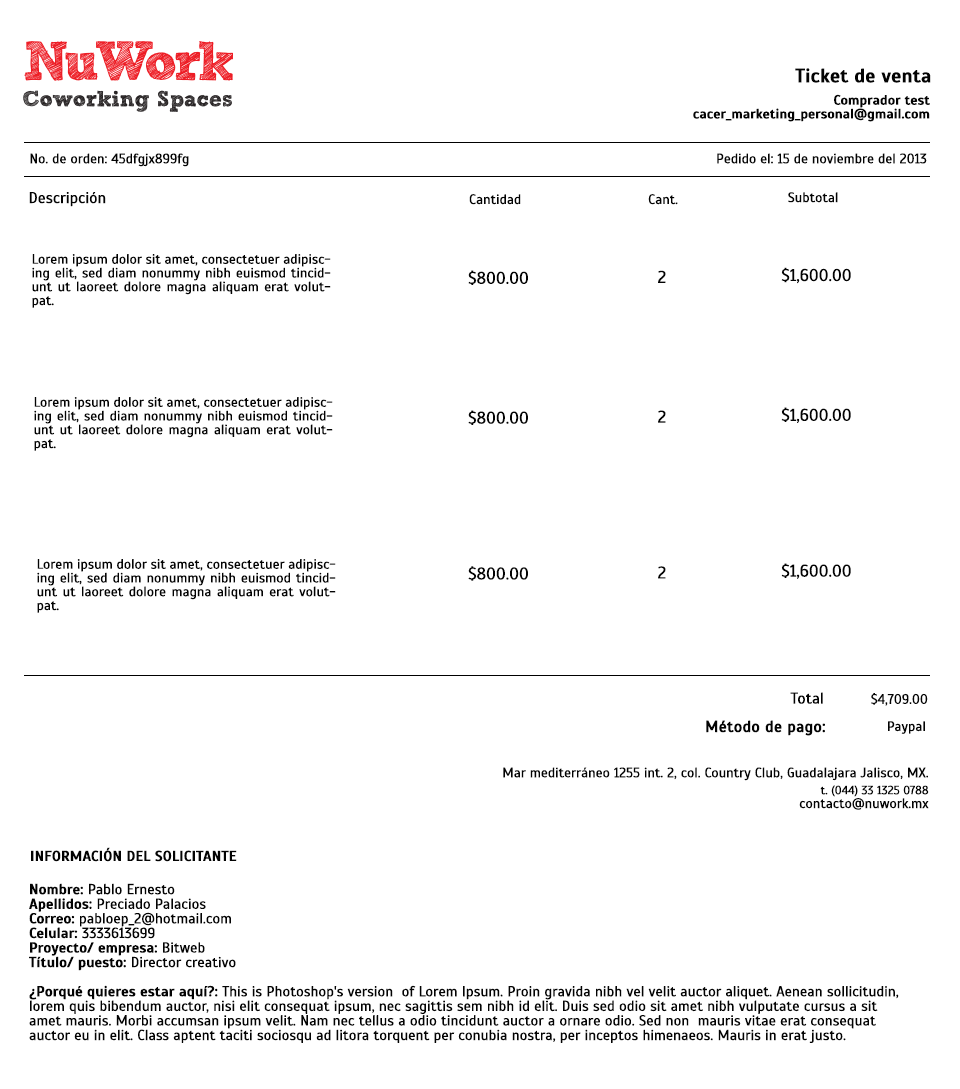
<style>
.page{position:relative;width:960px;height:1089px;background:#ffffff}
.page>*{position:absolute;margin:0}
.t1{font:19.6px "Scada-Bold";color:#030303}
.t2{font:13.8px/13.8px "Scada-Bold";color:#030303}
.t3{font:13.8px "Scada-Regular";color:#030303}
.t4{font:15.7px "Scada-Regular";color:#030303}
.t5{font:13.8px/13.8px "Scada-Regular";color:#030303}
.t6{font:17px "Scada-Regular";color:#030303}
.t7{font:15.7px "Scada-Regular";color:#030303;font-weight:bold}
.t8{font:12px/13.8px "Scada-Regular";color:#030303}
.t9{font:12px/17px "Scada-Regular";color:#030303}
.t10{font:14.6px "Scada-Bold";color:#030303}
.t11{font:14.6px/14.6px "Scada-Regular";color:#030303}
.t12{font:14.6px/14.6px "Scada-Bold";color:#030303}
</style>
<div class="page">
<p class="t1" style="left:795px;top:68px;width:136px;height:15px">Ticket de venta</p>
<p class="t2" style="left:693px;top:94px;width:237px;height:28px;text-align:right">Comprador test<br>cacer_marketing_personal@gmail.com</p>
<p class="t3" style="left:30px;top:153px;width:159px;height:14px">No. de orden: 45dfgjx899fg</p>
<p class="t3" style="left:717px;top:153px;width:210px;height:11px">Pedido el: 15 de noviembre del 2013</p>
<p class="t4" style="left:29px;top:192px;width:77px;height:15px">Descripción</p>
<p class="t3" style="left:469px;top:194px;width:52px;height:11px">Cantidad</p>
<p class="t3" style="left:648px;top:194px;width:30px;height:11px">Cant.</p>
<p class="t3" style="left:788px;top:192px;width:50px;height:11px">Subtotal</p>
<p class="t5" style="left:32px;top:254px;width:299px;height:54px;text-align:justify">Lorem ipsum dolor sit amet, consectetuer adipiscing elit, sed diam nonummy nibh euismod tincidunt ut laoreet dolore magna aliquam erat volutpat.</p>
<p class="t6" style="left:468px;top:270px;width:60px;height:15px">$800.00</p>
<p class="t6" style="left:658px;top:270px;width:8px;height:13px">2</p>
<p class="t6" style="left:781px;top:267px;width:70px;height:17px">$1,600.00</p>
<p class="t5" style="left:34px;top:397px;width:299px;height:54px;text-align:justify">Lorem ipsum dolor sit amet, consectetuer adipiscing elit, sed diam nonummy nibh euismod tincidunt ut laoreet dolore magna aliquam erat volutpat.</p>
<p class="t6" style="left:468px;top:410px;width:60px;height:15px">$800.00</p>
<p class="t6" style="left:658px;top:410px;width:8px;height:13px">2</p>
<p class="t6" style="left:781px;top:407px;width:70px;height:16px">$1,600.00</p>
<p class="t5" style="left:37px;top:559px;width:299px;height:54px;text-align:justify">Lorem ipsum dolor sit amet, consectetuer adipiscing elit, sed diam nonummy nibh euismod tincidunt ut laoreet dolore magna aliquam erat volutpat.</p>
<p class="t6" style="left:468px;top:566px;width:60px;height:15px">$800.00</p>
<p class="t6" style="left:658px;top:566px;width:8px;height:13px">2</p>
<p class="t6" style="left:781px;top:563px;width:70px;height:16px">$1,600.00</p>
<p class="t4" style="left:790px;top:692px;width:33px;height:12px">Total</p>
<p class="t3" style="left:871px;top:693px;width:57px;height:13px">$4,709.00</p>
<p class="t7" style="left:706px;top:720px;width:119px;height:16px">Método de pago:</p>
<p class="t3" style="left:888px;top:721px;width:37px;height:13px">Paypal</p>
<p class="t5" style="left:503px;top:767px;width:426px;height:43px;text-align:right">Mar mediterráneo 1255 int. 2, col. Country Club, Guadalajara Jalisco, MX.<br><span class="t8">t. </span><span class="t9">(044) 33 1325 0788<br></span>contacto@nuwork.mx</p>
<p class="t10" style="left:31px;top:847px;width:206px;height:15px">INFORMACIÓN DEL SOLICITANTE</p>
<p class="t11" style="left:29px;top:883px;width:870px;height:160px"><span class="t12">Nombre: </span>Pablo Ernesto<br><span class="t12">Apellidos: </span>Preciado Palacios<br><span class="t12">Correo: </span>pabloep_2@hotmail.com<br><span class="t12">Celular: </span>3333613699<br><span class="t12">Proyecto/ empresa: </span>Bitweb<br><span class="t12">Título/ puesto: </span>Director creativo<br><br><span class="t12">¿Porqué quieres estar aquí?: </span>This is Photoshop's version  of Lorem Ipsum. Proin gravida nibh vel velit auctor aliquet. Aenean sollicitudin, lorem quis bibendum auctor, nisi elit consequat ipsum, nec sagittis sem nibh id elit. Duis sed odio sit amet nibh vulputate cursus a sit amet mauris. Morbi accumsan ipsum velit. Nam nec tellus a odio tincidunt auctor a ornare odio. Sed non  mauris vitae erat consequat auctor eu in elit. Class aptent taciti sociosqu ad litora torquent per conubia nostra, per inceptos himenaeos. Mauris in erat justo.</p>
</div>
